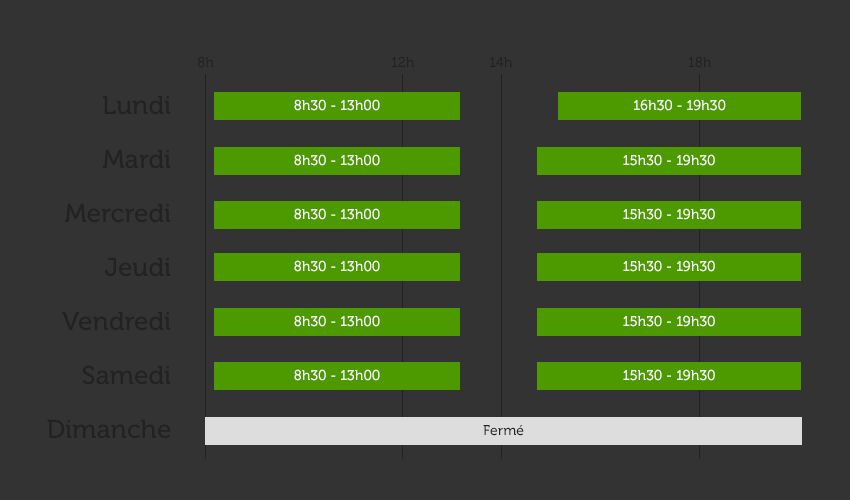
<style>
.page{position:relative;width:850px;height:500px;background:#333333}
.page>*{position:absolute;margin:0}
.t1{font:14px "Museo-500";color:#222222}
.t2{font:26px/54px "Museo-500";color:#222222}
.t3{font:14px "Museo-500";color:#ffffff}
</style>
<div class="page">
<p class="t1" style="left:198px;top:56px;width:16px;height:12px">8h</p>
<p class="t1" style="left:391px;top:56px;width:23px;height:11px">12h</p>
<p class="t1" style="left:490px;top:57px;width:22px;height:10px">14h</p>
<p class="t1" style="left:688px;top:56px;width:23px;height:12px">18h</p>
<p class="t2" style="left:47px;top:95px;width:124px;height:344px;text-align:right">Lundi<br>Mardi<br>Mercredi<br>Jeudi<br>Vendredi<br>Samedi<br>Dimanche</p>
<p class="t3" style="left:294px;top:99px;width:86px;height:12px">8h30 - 13h00</p>
<p class="t3" style="left:634px;top:99px;width:92px;height:12px">16h30 - 19h30</p>
<p class="t3" style="left:294px;top:154px;width:86px;height:12px">8h30 - 13h00</p>
<p class="t3" style="left:623px;top:154px;width:92px;height:12px">15h30 - 19h30</p>
<p class="t3" style="left:294px;top:208px;width:86px;height:12px">8h30 - 13h00</p>
<p class="t3" style="left:623px;top:208px;width:92px;height:12px">15h30 - 19h30</p>
<p class="t3" style="left:294px;top:260px;width:86px;height:12px">8h30 - 13h00</p>
<p class="t3" style="left:623px;top:260px;width:92px;height:12px">15h30 - 19h30</p>
<p class="t3" style="left:294px;top:315px;width:86px;height:12px">8h30 - 13h00</p>
<p class="t3" style="left:623px;top:315px;width:92px;height:12px">15h30 - 19h30</p>
<p class="t3" style="left:294px;top:369px;width:86px;height:12px">8h30 - 13h00</p>
<p class="t3" style="left:623px;top:369px;width:92px;height:12px">15h30 - 19h30</p>
<p class="t1" style="left:483px;top:425px;width:41px;height:11px">Fermé</p>
</div>
